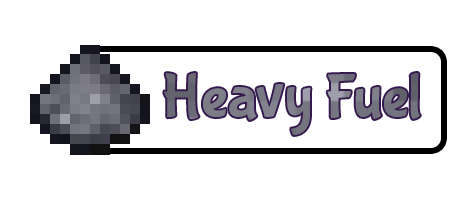
<style>
.page{position:relative;width:460px;height:200px;background:#ffffff}
.page>*{position:absolute;margin:0}
.t1{font:63px "BubblegumSans-Regular";color:#787884}
</style>
<div class="page">
<p class="t1" style="left:164px;top:73px;width:256px;height:62px">Heavy Fuel</p>
</div>
